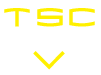
<style>
.page{position:relative;width:101px;height:75px;background:#ffffff}
.page>*{position:absolute;margin:0}
.t1{font:36px "1979";color:#fff000}
</style>
<div class="page">
<p class="t1" style="left:4px;top:8px;width:91px;height:62px;text-align:center">TSC<br>V</p>
</div>
